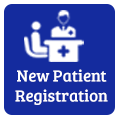
<style>
.page{position:relative;width:120px;height:120px;background:#142b9e}
.page>*{position:absolute;margin:0}
.t1{font:16.7px "BreeSerif-Regular";color:#ffffff}
</style>
<div class="page">
<p class="t1" style="left:15px;top:69px;width:93px;height:36px;text-align:center">New Patient <br>Registration</p>
</div>
